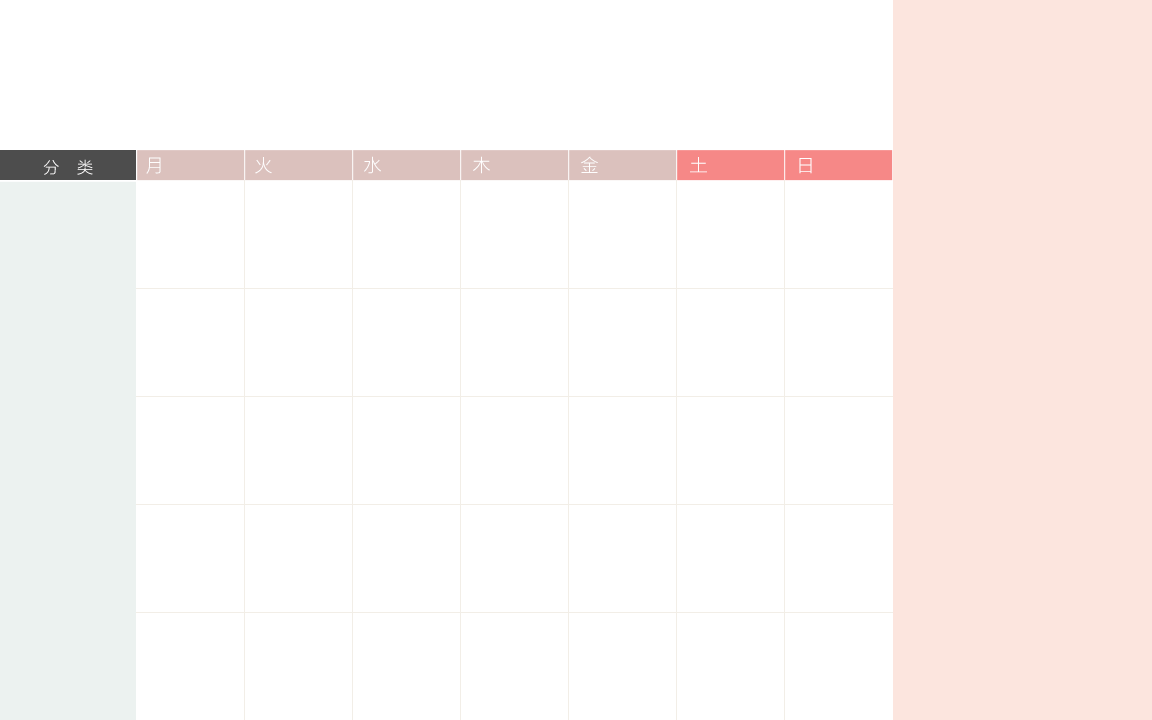
<style>
.page{position:relative;width:1152px;height:720px;background:#ffffff}
.page>*{position:absolute;margin:0}
.t1{font:16px "FZLTXHK--GBK1-0"}
.t2{font:18px "FZLTXHK--GBK1-0";color:#fffefe}
</style>
<div class="page">
<p class="t1" style="left:43px;top:159px;width:50px;height:16px">分    类</p>
<p class="t2" style="left:146px;top:157px;width:15px;height:17px">月</p>
<p class="t2" style="left:255px;top:157px;width:17px;height:17px">火</p>
<p class="t2" style="left:364px;top:156px;width:17px;height:18px">水</p>
<p class="t2" style="left:473px;top:156px;width:17px;height:18px">木</p>
<p class="t2" style="left:581px;top:156px;width:17px;height:17px">金</p>
<p class="t2" style="left:690px;top:157px;width:17px;height:16px">土</p>
<p class="t2" style="left:799px;top:158px;width:13px;height:16px">日</p>
</div>
